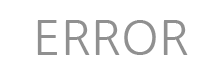
<style>
.page{position:relative;width:219px;height:77px;background:#ffffff}
.page>*{position:absolute;margin:0}
.t1{font:48px "NanumGothic";color:#909090}
</style>
<div class="page">
<p class="t1" style="left:37px;top:20px;width:151px;height:35px">ERROR</p>
</div>
